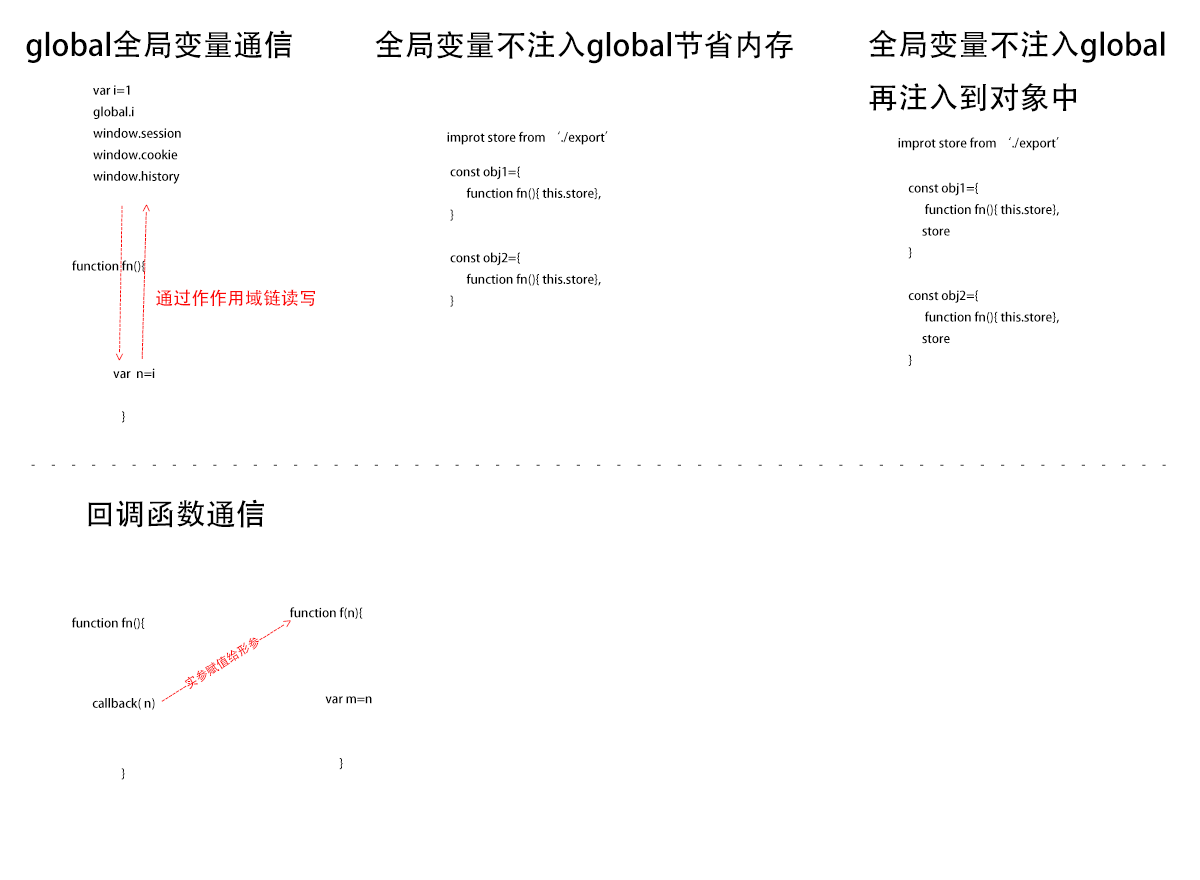
<style>
.page{position:relative;width:1200px;height:880px;background:#ffffff}
.page>*{position:absolute;margin:0}
.t1{font:30.3px "AdobeHeitiStd-Regular";color:#000000}
.t2{font:12.3px "AdobeHeitiStd-Regular";color:#000000}
.t3{font:12.3px "AdobeHeitiStd-Regular";color:#fc0707}
.t4{font:18px "AdobeHeitiStd-Regular";color:#fc0707}
.t5{font:12px "AdobeHeitiStd-Regular";letter-spacing:1.34em}
</style>
<div class="page">
<p class="t1" style="left:26px;top:30px;width:266px;height:33px">global全局变量通信</p>
<p class="t1" style="left:375px;top:30px;width:418px;height:34px">全局变量不注入global节省内存</p>
<p class="t1" style="left:868px;top:29px;width:297px;height:83px">全局变量不注入global<br>再注入到对象中</p>
<p class="t2" style="left:93px;top:85px;width:88px;height:99px">var i=1<br>global.i <br>window.session<br>window.cookie<br>window.history</p>
<p class="t2" style="left:447px;top:131px;width:161px;height:14px">improt store from ‘./export’</p>
<p class="t2" style="left:898px;top:137px;width:161px;height:14px">improt store from ‘./export’</p>
<p class="t2" style="left:450px;top:166px;width:151px;height:141px">const obj1={<br>      function fn(){ this.store},<br>}<br><br>const obj2={<br>      function fn(){ this.store},<br>}</p>
<p class="t2" style="left:908px;top:182px;width:151px;height:184px">const obj1={<br>      function fn(){ this.store},<br>     store<br>}<br><br>const obj2={<br>      function fn(){ this.store},<br>     store<br>}</p>
<p class="t3" style="left:115px;top:205px;width:9px;height:156px;rotate:91deg">-----------------------------------&gt;</p>
<p class="t3" style="left:141px;top:204px;width:9px;height:155px;rotate:-88deg">-----------------------------------&gt;</p>
<p class="t2" style="left:72px;top:260px;width:83px;height:163px">function fn(){    <br><br><br><br><br>               var  n=i<br><br>                  }</p>
<p class="t4" style="left:156px;top:289px;width:159px;height:18px">通过作作用域链读写</p>
<p class="t5" style="left:31px;top:464px;width:1135px;height:2px">---------------------------------------------------------</p>
<p class="t1" style="left:88px;top:499px;width:176px;height:29px">回调函数通信</p>
<p class="t2" style="left:72px;top:617px;width:73px;height:163px">function fn(){    <br><br><br><br><br><br><br>                  }</p>
<p class="t2" style="left:290px;top:607px;width:82px;height:163px">function f(n){    <br><br><br><br>             var m=n<br><br><br>                  }</p>
<p class="t3" style="left:161px;top:620px;width:130px;height:82px;rotate:-32deg">-------实参赋值给形参-------&gt;</p>
<p class="t2" style="left:92px;top:698px;width:63px;height:12px">callback( n)</p>
</div>
